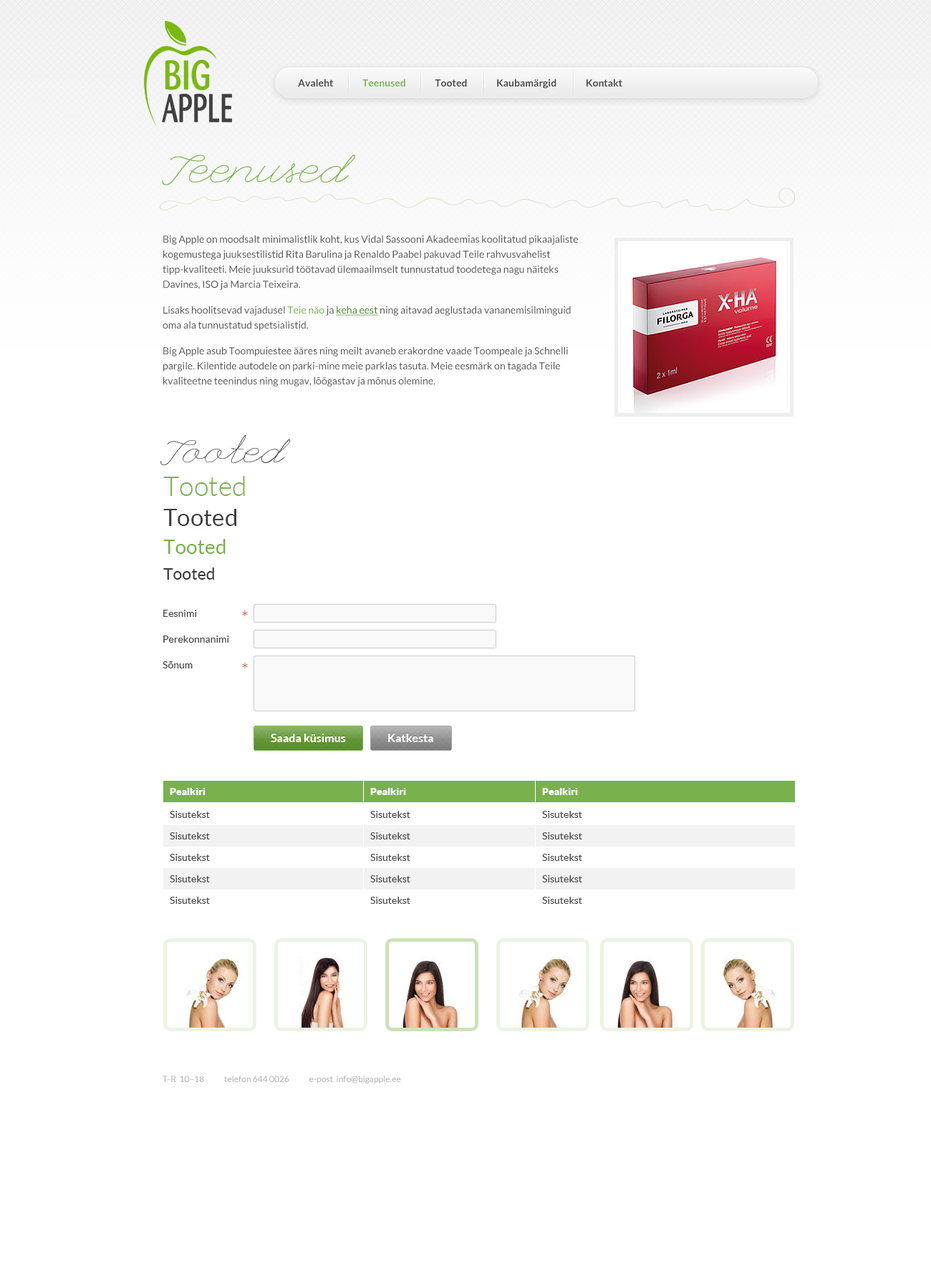
<style>
.page{position:relative;width:931px;height:1281px;background:#ffffff}
.page>*{position:absolute;margin:0}
.t1{font:10px "Lato-Bold";color:#464648}
.t2{font:10px "Lato-Bold";color:#79b14d}
.t3{font:51.5px "LeagueScript";color:#6aac35}
.t4{font:10px/15px "Lato-Regular";color:#575757}
.t5{font:10px/15px "Lato-Regular";color:#79b14d}
.t6{font:10px/15px "Lato-Regular";color:#4a821f;text-decoration:underline}
.t7{font:43px "LeagueScript";color:#3d3d3e}
.t8{font:27.2px "Lato-Light";color:#79b14d}
.t9{font:23.6px "Lato-Regular";color:#3d3d3e}
.t10{font:20px "Lato-Regular";color:#79b14d}
.t11{font:16.5px "Lato-Regular";color:#393939}
.t12{font:10px "Lato-Regular";color:#474747}
.t13{font:17.9px "Lato-Regular";color:#dc7053}
.t14{font:11.5px "Lato-Bold";color:#ffffff}
.t15{font:10px "Lato-Black";color:#ffffff}
.t16{font:8.6px "Lato-Regular";color:#b0aeae}
</style>
<div class="page">
<p class="t1" style="left:298px;top:79px;width:324px;height:10px">Avaleht               <span class="t2">Teenused</span>               Tooted               Kaubamärgid               Kontakt</p>
<p class="t3" style="left:162px;top:155px;width:193px;height:30px">Teenused</p>
<p class="t4" style="left:162px;top:236px;width:416px;height:151px">Big Apple on moodsalt minimalistlik koht, kus Vidal Sassooni Akadeemias koolitatud pikaajaliste kogemustega juuksestilistid Rita Barulina ja Renaldo Paabel pakuvad Teile rahvusvahelist tipp-kvaliteeti. Meie juuksurid töötavad ülemaailmselt tunnustatud toodetega nagu näiteks Davines, ISO ja Marcia Teixeira.<br>Lisaks hoolitsevad vajadusel <span class="t5">Teie näo</span> ja <span class="t6">keha eest</span> ning aitavad aeglustada vananemisilminguid oma ala tunnustatud spetsialistid.<br>Big Apple asub Toompuiestee ääres ning meilt avaneb erakordne vaade Toompeale ja Schnelli pargile. Kilentide autodele on parki-mine meie parklas tasuta. Meie eesmärk on tagada Teile kvaliteetne teenindus ning mugav, lõõgastav ja mõnus olemine.</p>
<p class="t7" style="left:160px;top:435px;width:131px;height:30px">Tooted</p>
<p class="t8" style="left:163px;top:476px;width:82px;height:20px">Tooted</p>
<p class="t9" style="left:163px;top:509px;width:73px;height:17px">Tooted</p>
<p class="t10" style="left:163px;top:539px;width:62px;height:15px">Tooted</p>
<p class="t11" style="left:163px;top:568px;width:51px;height:12px">Tooted</p>
<p class="t12" style="left:163px;top:610px;width:34px;height:7px">Eesnimi</p>
<p class="t13" style="left:242px;top:611px;width:6px;height:5px">*</p>
<p class="t12" style="left:163px;top:636px;width:66px;height:7px">Perekonnanimi</p>
<p class="t12" style="left:162px;top:661px;width:31px;height:8px">Sõnum</p>
<p class="t13" style="left:242px;top:663px;width:6px;height:6px">*</p>
<p class="t14" style="left:271px;top:734px;width:75px;height:8px">Saada küsimus</p>
<p class="t14" style="left:388px;top:734px;width:45px;height:8px">Katkesta</p>
<p class="t15" style="left:170px;top:788px;width:35px;height:7px">Pealkiri</p>
<p class="t15" style="left:370px;top:788px;width:36px;height:7px">Pealkiri</p>
<p class="t15" style="left:542px;top:788px;width:36px;height:7px">Pealkiri</p>
<p class="t12" style="left:170px;top:811px;width:40px;height:7px">Sisutekst</p>
<p class="t12" style="left:370px;top:811px;width:40px;height:7px">Sisutekst</p>
<p class="t12" style="left:542px;top:811px;width:40px;height:7px">Sisutekst</p>
<p class="t12" style="left:170px;top:833px;width:40px;height:7px">Sisutekst</p>
<p class="t12" style="left:370px;top:833px;width:40px;height:7px">Sisutekst</p>
<p class="t12" style="left:542px;top:833px;width:40px;height:7px">Sisutekst</p>
<p class="t12" style="left:170px;top:854px;width:40px;height:7px">Sisutekst</p>
<p class="t12" style="left:370px;top:854px;width:40px;height:7px">Sisutekst</p>
<p class="t12" style="left:542px;top:854px;width:40px;height:7px">Sisutekst</p>
<p class="t12" style="left:170px;top:875px;width:40px;height:8px">Sisutekst</p>
<p class="t12" style="left:370px;top:875px;width:40px;height:8px">Sisutekst</p>
<p class="t12" style="left:542px;top:875px;width:40px;height:8px">Sisutekst</p>
<p class="t12" style="left:170px;top:897px;width:40px;height:7px">Sisutekst</p>
<p class="t12" style="left:370px;top:897px;width:40px;height:7px">Sisutekst</p>
<p class="t12" style="left:542px;top:897px;width:40px;height:7px">Sisutekst</p>
<p class="t16" style="left:162px;top:1076px;width:239px;height:8px">T-R  10–18            telefon 644 0026            e-post  info@bigapple.ee</p>
</div>
